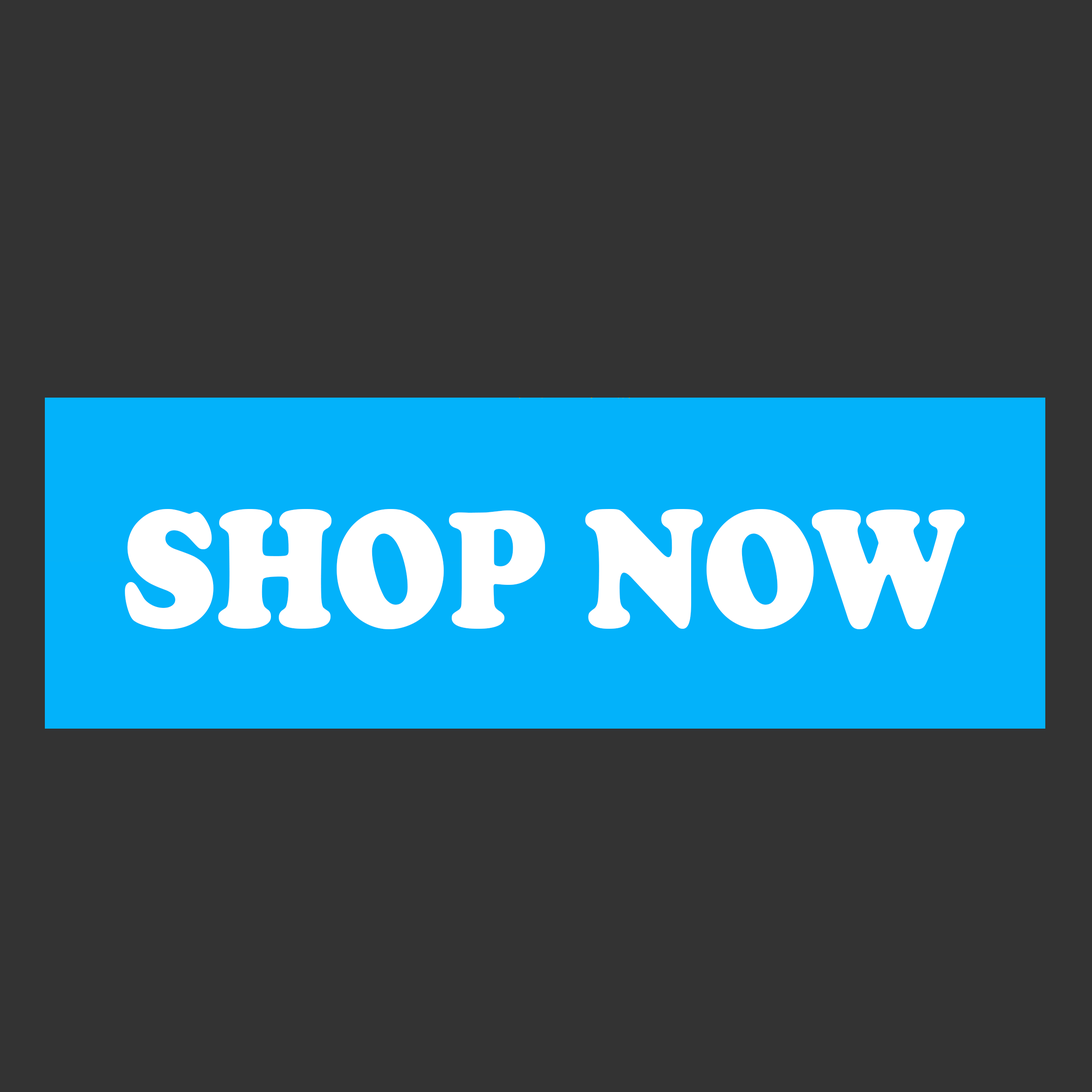
<style>
.page{position:relative;width:1092px;height:1092px;background:#333333}
.page>*{position:absolute;margin:0}
.t1{font:173.2px "CooperBlack";color:#ffffff;scale:0.84 1}
</style>
<div class="page">
<p class="t1" style="left:125px;top:509px;width:840px;height:120px">SHOP NOW</p>
</div>
